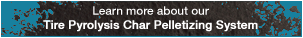
<style>
.page{position:relative;width:303px;height:38px}
.page>*{position:absolute;margin:0}
.t1{font:11.7px "HelveticaNeueLTCom-Md";color:#ffffff;font-weight:bold}
.t2{font:11.7px "HelveticaNeueLTCom-Md";color:#ffffff}
</style>
<div class="page">
<p class="t1" style="left:43px;top:6px;width:215px;height:26px;text-align:center"><span class="t2">Learn more about our<br></span>Tire Pyrolysis Char Pelletizing System</p>
</div>
